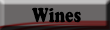
<style>
.page{position:relative;width:110px;height:30px;background:#696666}
.page>*{position:absolute;margin:0}
.t1{font:20px "CooperBlackStd";color:#000000;scale:0.75 1}
</style>
<div class="page">
<p class="t1" style="left:32px;top:7px;width:49px;height:16px">Wines</p>
</div>
